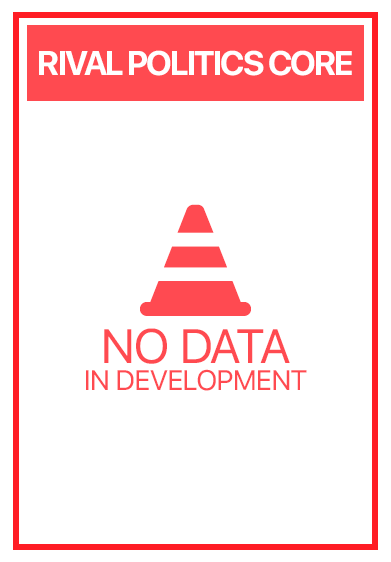
<style>
.page{position:relative;width:391px;height:562px;background:#ffffff}
.page>*{position:absolute;margin:0}
.t1{font:34px "SFProDisplay-Bold";letter-spacing:-0.05em;color:#ffffff;text-transform:uppercase}
.t2{font:28px/27px "SFUIText-Regular";letter-spacing:-0.05em;color:#ff4a51;text-transform:uppercase}
.t3{font:48px/29px "SFUIText-Regular";letter-spacing:-0.05em;color:#ff4a51;text-transform:uppercase}
</style>
<div class="page">
<p class="t1" style="left:39px;top:50px;width:313px;height:26px">RIVAL POLITICS CORE</p>
<p class="t2" style="left:86px;top:328px;width:221px;height:63px;text-align:center"><span class="t3">no data<br></span>in Development</p>
</div>
